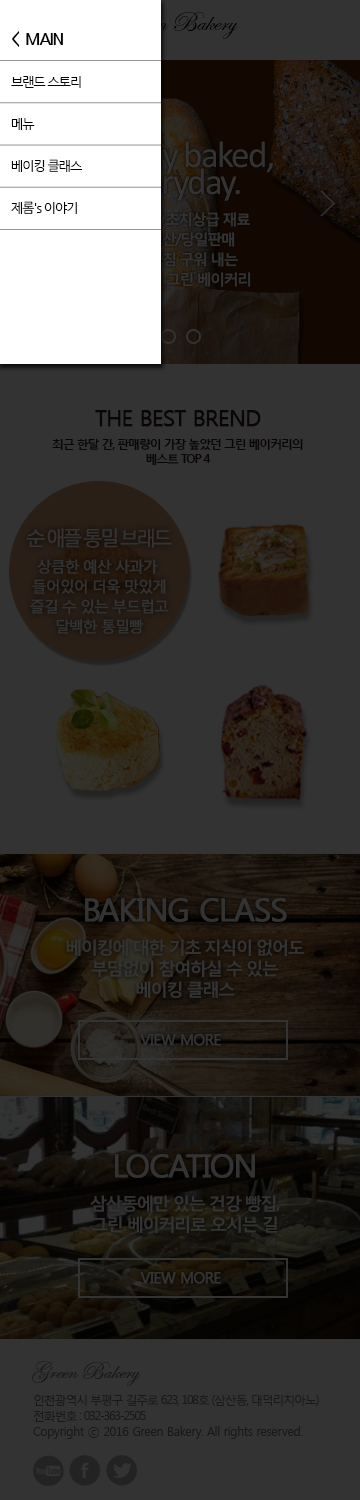
<style>
.page{position:relative;width:360px;height:1500px;background:#333333}
.page>*{position:absolute;margin:0}
.t1{font:13px/42px "NanumGothic";letter-spacing:-0.075em;color:#000000}
.t2{font:16px/42px "NanumGothicBold";letter-spacing:-0.075em;color:#000000}
.t3{font:12px/22px "MalgunGothicBold";letter-spacing:-0.1em;color:#0a0606}
.t4{font:22px/22px "MalgunGothicRegular";letter-spacing:-0.05em;color:#0a0606;font-weight:bold}
.t5{font:12px/15px "MalgunGothicBold";letter-spacing:-0.1em;color:#0a0606}
.t6{font:15px/20px "MalgunGothicRegular";letter-spacing:-0.1em;color:#333333;font-weight:bold}
.t7{font:20px/20px "MalgunGothicRegular";letter-spacing:-0.2em;color:#333333;font-weight:bold}
.t8{font:15px/27px "MalgunGothicRegular";letter-spacing:-0.1em;color:#333333;font-weight:bold}
.t9{font:17.5px/21px "MalgunGothicBold";letter-spacing:-0.1em;color:#333333}
.t10{font:31.5px/48.6px "MalgunGothicRegular";letter-spacing:-0.1em;color:#333333;font-weight:bold}
.t11{font:31.5px/48.6px "MalgunGothicRegular";letter-spacing:-0.05em;color:#333333;font-weight:bold}
.t12{font:17.5px/31.5px "MalgunGothicBold";letter-spacing:-0.1em;color:#333333}
.t13{font:15px "MalgunGothicRegular";letter-spacing:-0.05em;color:#333333;font-weight:bold}
.t14{font:24px "EdwardianScriptITC";color:#1a1918}
.t15{font:12px/16px "MalgunGothicRegular";letter-spacing:-0.1em;color:#1a1918}
.t16{font:12px/16px "MalgunGothicRegular";letter-spacing:-0.025em;color:#1a1918}
</style>
<div class="page">
<p class="t1" style="left:11px;top:31px;width:71px;height:183px"><span class="t2">&lt;  MAIN<br></span>브랜드 스토리           <br>메뉴<br>베이킹 클래스<br>제롬's 이야기</p>
<p class="t3" style="left:52px;top:410px;width:251px;height:55px;text-align:center"><span class="t4">THE BEST BREND<br></span>최근 한달 간, 판매량이 가장 높았던 그린 베이커리의<br><span class="t5">베스트 TOP 4</span></p>
<p class="t6" style="left:26px;top:528px;width:146px;height:106px;text-align:center"><span class="t7">순 애플 통밀 브래드<br></span><span class="t8">상큼한 예산 사과가 <br></span>들어있어 더욱 맛있게<br>즐길 수 있는 부드럽고<br>달백한 통밀빵</p>
<p class="t9" style="left:66px;top:898px;width:238px;height:100px;text-align:center"><span class="t10">B</span><span class="t11">AKING CLASS<br></span><span class="t12">베이킹에 대한 기초 지식이 없어도<br></span>부담없이 참여하실 수 있는<br>베이킹 클래스</p>
<p class="t13" style="left:140px;top:1034px;width:81px;height:12px">VIEW MORE</p>
<p class="t12" style="left:90px;top:1154px;width:190px;height:79px;text-align:center"><span class="t11">LOCATION<br></span>삼산동에만 있는 건강 빵집,<br><span class="t9">그린 베이커리로 오시는 길</span></p>
<p class="t13" style="left:140px;top:1272px;width:81px;height:12px">VIEW MORE</p>
<p class="t14" style="left:32px;top:1361px;width:109px;height:25px">Green Bakery</p>
<p class="t15" style="left:33px;top:1394px;width:286px;height:45px">인천광역시 부평구 길주로 623, 108호 (삼산동, 대덕리치아노)<br>전화번호 : 032-363-2505<br><span class="t16">Copyright ⓒ 2016 Green Bakery. All rights reserved.</span></p>
</div>
